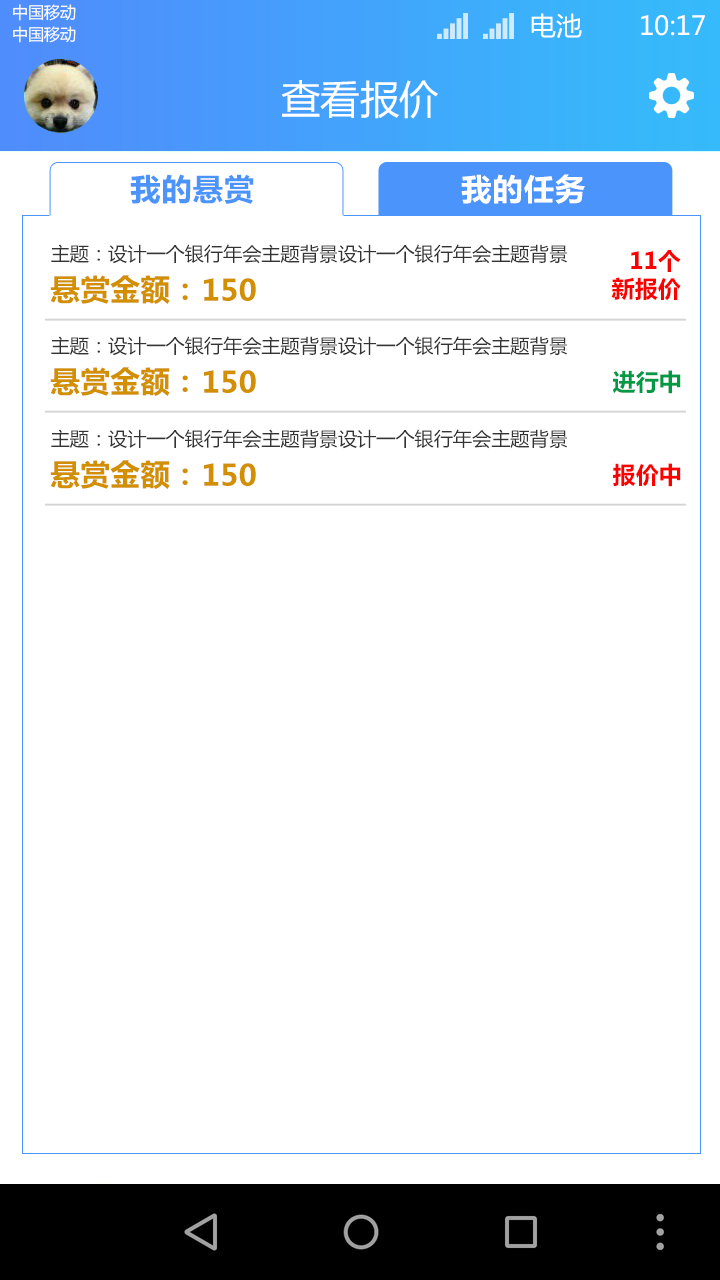
<style>
.page{position:relative;width:720px;height:1280px;background:#ffffff}
.page>*{position:absolute;margin:0}
.t1{font:16.2px "MicrosoftYaHei";color:#ffffff;text-transform:uppercase}
.t2{font:26.1px "MicrosoftYaHei";color:#ffffff;text-transform:uppercase}
.t3{font:39.5px "MicrosoftYaHei";color:#ffffff;text-transform:uppercase}
.t4{font:30.3px "MicrosoftYaHei-Bold";letter-spacing:0.05em;color:#4b94fc}
.t5{font:30.3px "MicrosoftYaHei-Bold";letter-spacing:0.05em;color:#ffffff}
.t6{font:19px "MicrosoftYaHei";color:#333333}
.t7{font:23.3px/28px "MicrosoftYaHei-Bold";color:#ff0000}
.t8{font:29.5px "MicrosoftYaHei-Bold";color:#d28f00}
.t9{font:23.3px "MicrosoftYaHei-Bold";color:#009944}
.t10{font:23.3px "MicrosoftYaHei-Bold";color:#ff0000}
</style>
<div class="page">
<p class="t1" style="left:13px;top:4px;width:63px;height:17px">中国移动</p>
<p class="t2" style="left:531px;top:13px;width:51px;height:25px">电池</p>
<p class="t2" style="left:641px;top:15px;width:64px;height:21px">10:17</p>
<p class="t1" style="left:13px;top:26px;width:63px;height:17px">中国移动</p>
<p class="t3" style="left:281px;top:80px;width:157px;height:39px">查看报价</p>
<p class="t4" style="left:130px;top:174px;width:124px;height:30px">我的悬赏</p>
<p class="t5" style="left:461px;top:174px;width:124px;height:30px">我的任务</p>
<p class="t6" style="left:51px;top:244px;width:516px;height:20px">主题：设计一个银行年会主题背景设计一个银行年会主题背景</p>
<p class="t7" style="left:611px;top:250px;width:70px;height:51px;text-align:right">11个<br>新报价</p>
<p class="t8" style="left:50px;top:275px;width:138px;height:29px">悬赏金额：</p>
<p class="t8" style="left:204px;top:278px;width:52px;height:23px">150</p>
<p class="t6" style="left:51px;top:336px;width:516px;height:20px">主题：设计一个银行年会主题背景设计一个银行年会主题背景</p>
<p class="t8" style="left:50px;top:367px;width:138px;height:29px">悬赏金额：</p>
<p class="t8" style="left:204px;top:370px;width:52px;height:23px">150</p>
<p class="t9" style="left:613px;top:370px;width:68px;height:24px">进行中</p>
<p class="t6" style="left:51px;top:429px;width:516px;height:20px">主题：设计一个银行年会主题背景设计一个银行年会主题背景</p>
<p class="t8" style="left:50px;top:460px;width:138px;height:29px">悬赏金额：</p>
<p class="t8" style="left:204px;top:463px;width:52px;height:23px">150</p>
<p class="t10" style="left:612px;top:463px;width:69px;height:24px">报价中</p>
</div>
